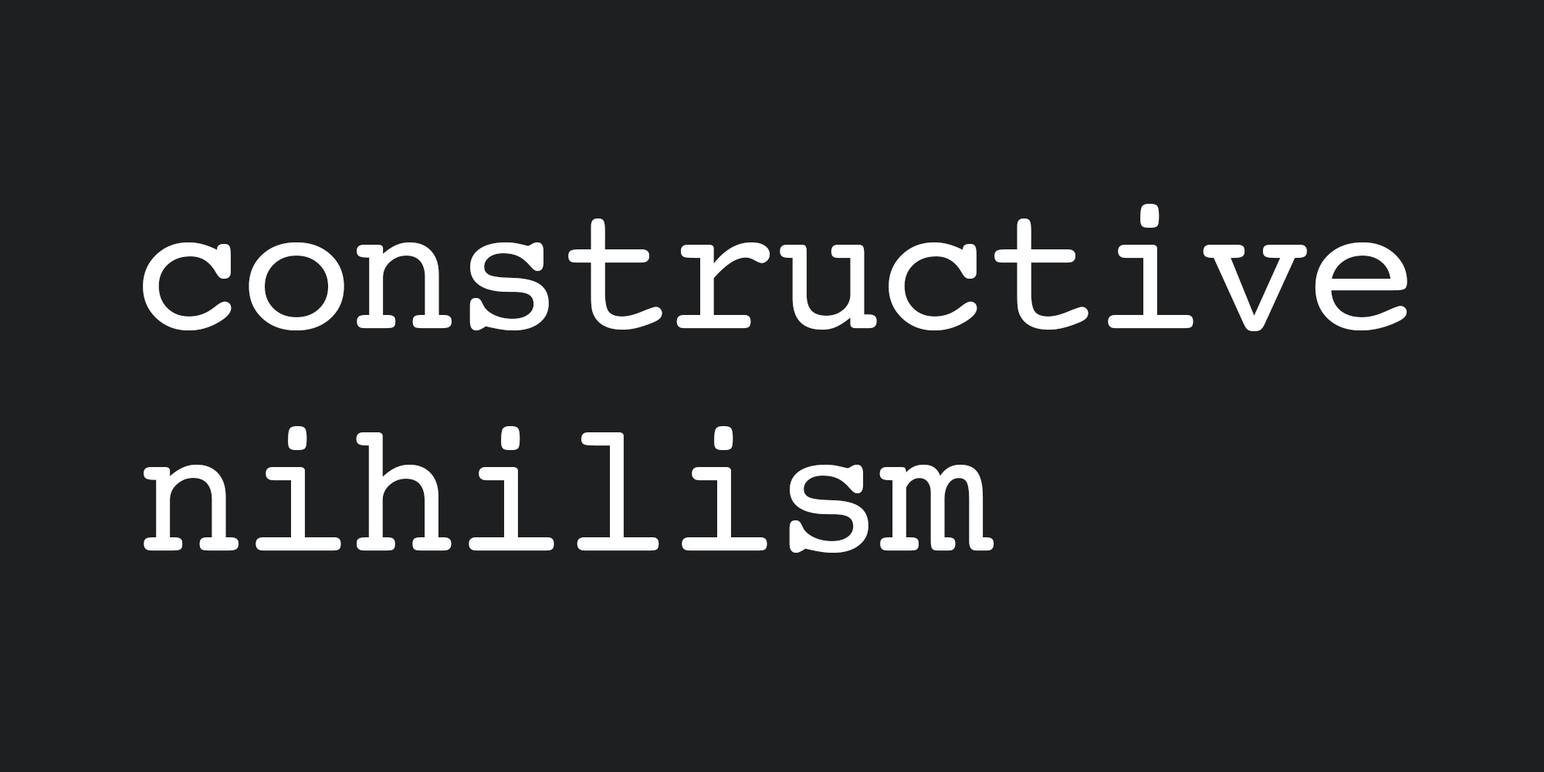
<style>
.page{position:relative;width:1544px;height:772px;background:#1d1f21}
.page>*{position:absolute;margin:0}
.t1{font:185.3px "Courier";letter-spacing:-0.025em;color:#ffffff}
</style>
<div class="page">
<p class="t1" style="left:143px;top:204px;width:1265px;height:349px">constructive<br>nihilism</p>
</div>
